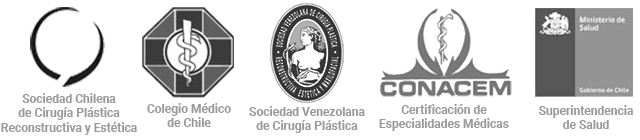
<style>
.page{position:relative;width:640px;height:140px;background:#ffffff}
.page>*{position:absolute;margin:0}
.t1{font:12px "Roboto-Bold";color:#999999}
</style>
<div class="page">
<p class="t1" style="left:1px;top:93px;width:136px;height:42px;text-align:center">Sociedad Chilena<br>de Cirugía Plástica<br>Reconstructiva y Estética</p>
<p class="t1" style="left:147px;top:103px;width:84px;height:24px;text-align:center">Colegio Médico<br>de Chile</p>
<p class="t1" style="left:249px;top:106px;width:116px;height:27px;text-align:center">Sociedad Venezolana<br>de Cirugía Plástica</p>
<p class="t1" style="left:379px;top:104px;width:130px;height:27px;text-align:center">Certificación de<br>Especialidades Médicas</p>
<p class="t1" style="left:539px;top:105px;width:94px;height:24px;text-align:center">Superintendencia<br>de Salud</p>
</div>
